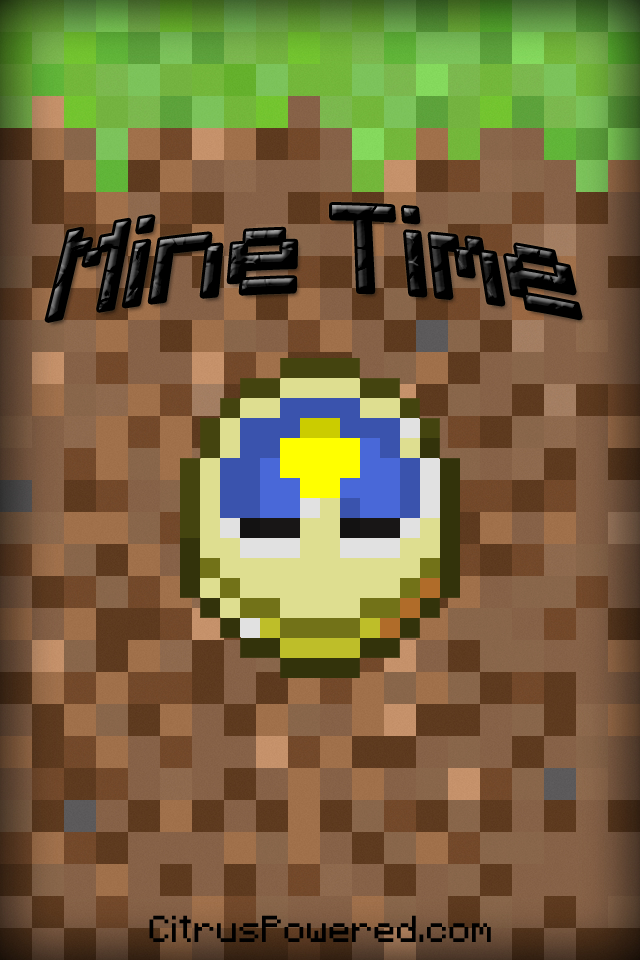
<style>
.page{position:relative;width:640px;height:960px}
.page>*{position:absolute;margin:0}
.t1{font:100px "Minecraft";color:#000000}
.t2{font:30px "Minecraft";color:#000000}
</style>
<div class="page">
<p class="t1" style="left:47px;top:205px;width:533px;height:115px">Mine Time</p>
<p class="t2" style="left:149px;top:915px;width:342px;height:27px">CitrusPowered.com</p>
</div>
